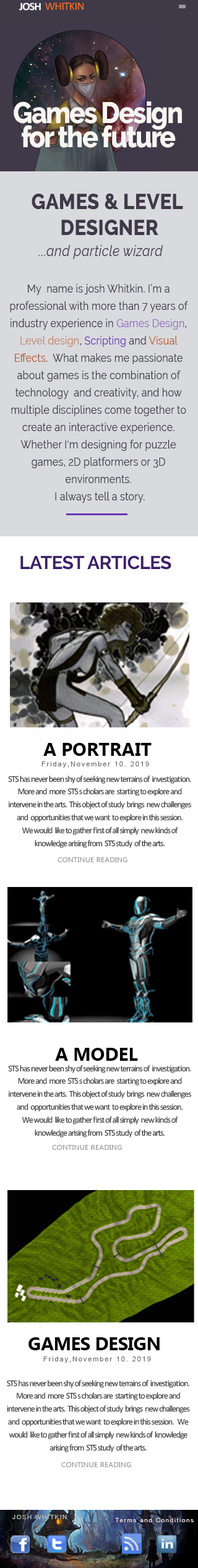
<style>
.page{position:relative;width:198px;height:1568px;background:#ffffff}
.page>*{position:absolute;margin:0}
.t1{font:11.1px "Calibri-Bold";letter-spacing:-0.06em;color:#f6f8fa;scale:1.04 1}
.t2{font:11.1px "Calibri";letter-spacing:-0.04em;color:#f27022;scale:1.04 1}
.t3{font:29.7px/24.1px "Raleway-ExtraBold";letter-spacing:-0.048em;color:#f8f6f2;scale:0.89 1}
.t4{font:21.6px "Raleway-ExtraBold";letter-spacing:0.012em;color:#3f3948;scale:0.89 1}
.t5{font:14.8px "Raleway-Italic";letter-spacing:0.012em;color:#3f3948;scale:0.89 1}
.t6{font:11.1px/17.3px "Raleway-Regular";letter-spacing:0.012em;color:#3f3948;scale:0.89 1}
.t7{font:11.1px/17.3px "Raleway-Regular";letter-spacing:0.012em;color:#8e70c1;scale:0.89 1}
.t8{font:11.1px/17.3px "Raleway-Regular";letter-spacing:0.012em;color:#c1866c;scale:0.89 1}
.t9{font:11.1px/17.3px "Raleway-Regular";letter-spacing:0.012em;color:#6835b4;scale:0.89 1}
.t10{font:11.1px/17.3px "Raleway-Regular";letter-spacing:0.012em;color:#b75c31;scale:0.89 1}
.t11{font:18.6px "Raleway-Bold";letter-spacing:-0.02em;color:#3c1f68}
.t12{font:18.6px "Ebrima-Bold";color:#000000}
.t13{font:18.6px "Ebrima-Bold";letter-spacing:-0.02em;color:#000000}
.t14{font:6.7px "ArialMT";letter-spacing:0.18em;color:#706e6e}
.t15{font:8.7px/12.9px "Calibri";letter-spacing:-0.08em;color:#393838}
.t16{font:7.3px "Ebrima";letter-spacing:0.02em;color:#959595}
.t17{font:5.9px "ArialMT";letter-spacing:0.18em;color:#c6c1c1}
.t18{font:5.9px "ArialMT";letter-spacing:0.18em;color:#eddbdb}
</style>
<div class="page">
<p class="t1" style="left:19px;top:2px;width:22px;height:9px">JOSH</p>
<p class="t2" style="left:45px;top:2px;width:39px;height:8px">WHITKIN</p>
<p class="t3" style="left:14px;top:101px;width:168px;height:47px;text-align:center">Games Design<br>for the future</p>
<p class="t4" style="left:32px;top:193px;width:151px;height:43px;text-align:center">GAMES &amp; LEVEL <br>DESIGNER</p>
<p class="t5" style="left:38px;top:245px;width:125px;height:14px">...and particle wizard</p>
<p class="t6" style="left:10px;top:284px;width:178px;height:219px;text-align:center">My  name is josh Whitkin. I’m a professional with more than 7 years of industry experience in <span class="t7">Games Design</span>, <span class="t8">Level design</span>, <span class="t9">Scripting </span>and <span class="t10">Visual Effects</span>.  What makes me passionate about games is the combination of technology  and creativity, and how multiple disciplines come together to create an interactive experience. Whether I'm designing for puzzle games, 2D platformers or 3D environments.<br> I always tell a story.</p>
<p class="t11" style="left:20px;top:555px;width:151px;height:15px">LATEST ARTICLES</p>
<p class="t12" style="left:43px;top:743px;width:109px;height:13px"><span class="t13">A</span> PORTRAIT</p>
<p class="t14" style="left:41px;top:761px;width:108px;height:7px">Friday,November 10. 2019</p>
<p class="t15" style="left:8px;top:776px;width:184px;height:72px;text-align:center">STS has never been shy of seeking new terrains of  investigation. <br>More and  more  STS s cholars are  starting to explore and <br>intervene in the arts.  This object of study  brings  new challenges <br>and  opportunities that we want  to explore in this session.   <br>We would  like to gather first of all simply  new kinds of  <br>knowledge arising from  STS study  of the arts.</p>
<p class="t16" style="left:58px;top:857px;width:69px;height:5px">CONTINUE READING</p>
<p class="t12" style="left:55px;top:1048px;width:83px;height:13px"><span class="t13">A</span> MODEL</p>
<p class="t15" style="left:8px;top:1065px;width:184px;height:72px;text-align:center">STS has never been shy of seeking new terrains of  investigation. <br>More and  more  STS s cholars are  starting to explore and <br>intervene in the arts.  This object of study  brings  new challenges <br>and  opportunities that we want  to explore in this session.   <br>We would  like to gather first of all simply  new kinds of  <br>knowledge arising from  STS study  of the arts.</p>
<p class="t16" style="left:52px;top:1145px;width:70px;height:5px">CONTINUE READING</p>
<p class="t13" style="left:28px;top:1337px;width:132px;height:13px">GAMES DESIGN</p>
<p class="t14" style="left:43px;top:1356px;width:108px;height:7px">Friday,November 10. 2019</p>
<p class="t15" style="left:7px;top:1380px;width:183px;height:72px;text-align:center">STS has never been shy of seeking new terrains of  investigation. More and  more  STS s cholars are  starting to explore and intervene in the arts.  This object of study  brings  new challenges and  opportunities that we want  to explore in this session.   We would  like to gather first of all simply  new kinds of  knowledge arising from  STS study  of the arts.</p>
<p class="t16" style="left:61px;top:1462px;width:70px;height:5px">CONTINUE READING</p>
<p class="t17" style="left:12px;top:1515px;width:55px;height:4px">JOSH WHITKIN</p>
<p class="t18" style="left:115px;top:1518px;width:79px;height:4px">Terms and Conditions</p>
</div>
